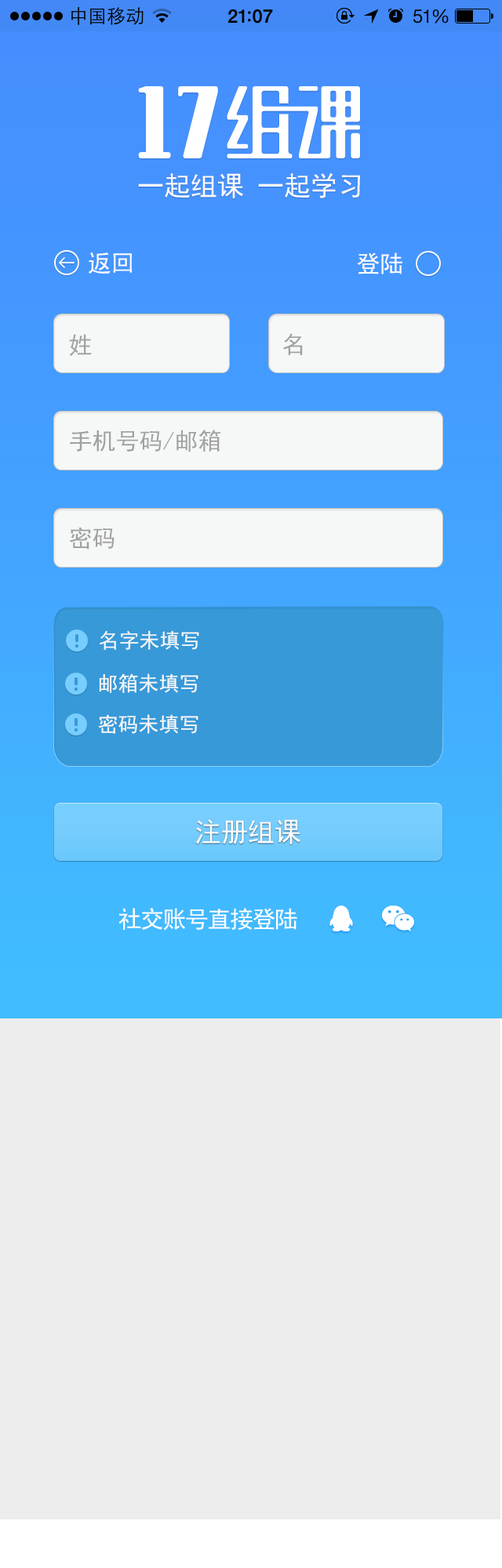
<style>
.page{position:relative;width:502px;height:1568px;background:#ededed}
.page>*{position:absolute;margin:0}
.t1{font:26.7px "SimHei";color:#fbfbfb}
.t2{font:23.5px "SimHei";color:#fefefe}
.t3{font:23.5px "SimHei";color:#a1a1a1}
.t4{font:20.4px "SimHei";color:#f6f8f8}
.t5{font:26.7px "SimHei";color:#fefefe}
.t6{font:23.5px "SimHei";letter-spacing:-0.05em;color:#fefefe}
</style>
<div class="page">
<p class="t1" style="left:138px;top:172px;width:223px;height:26px">一起组课 一起学习</p>
<p class="t2" style="left:89px;top:252px;width:43px;height:22px">返回</p>
<p class="t2" style="left:357px;top:252px;width:45px;height:22px">登陆</p>
<p class="t3" style="left:69px;top:334px;width:23px;height:22px">姓</p>
<p class="t3" style="left:283px;top:333px;width:20px;height:22px">名</p>
<p class="t3" style="left:70px;top:430px;width:150px;height:22px">手机号码/邮箱</p>
<p class="t3" style="left:69px;top:527px;width:45px;height:23px">密码</p>
<p class="t4" style="left:100px;top:630px;width:99px;height:20px">名字未填写</p>
<p class="t4" style="left:99px;top:673px;width:99px;height:20px">邮箱未填写</p>
<p class="t4" style="left:98px;top:714px;width:100px;height:20px">密码未填写</p>
<p class="t5" style="left:195px;top:819px;width:105px;height:25px">注册组课</p>
<p class="t6" style="left:118px;top:908px;width:179px;height:23px">社交账号直接登陆</p>
</div>
